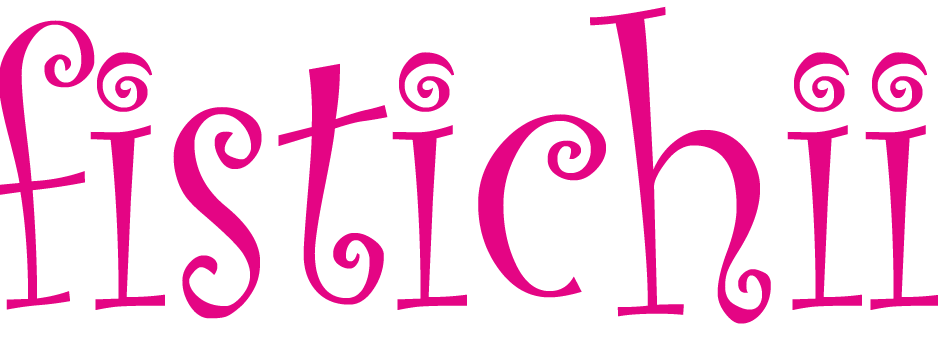
<style>
.page{position:relative;width:938px;height:344px;background:#ffffff}
.page>*{position:absolute;margin:0}
.t1{font:391.9px "CurlzMT";color:#e40584;scale:0.94 1}
</style>
<div class="page">
<p class="t1" style="left:0px;top:6px;width:938px;height:318px">fistichii</p>
</div>
